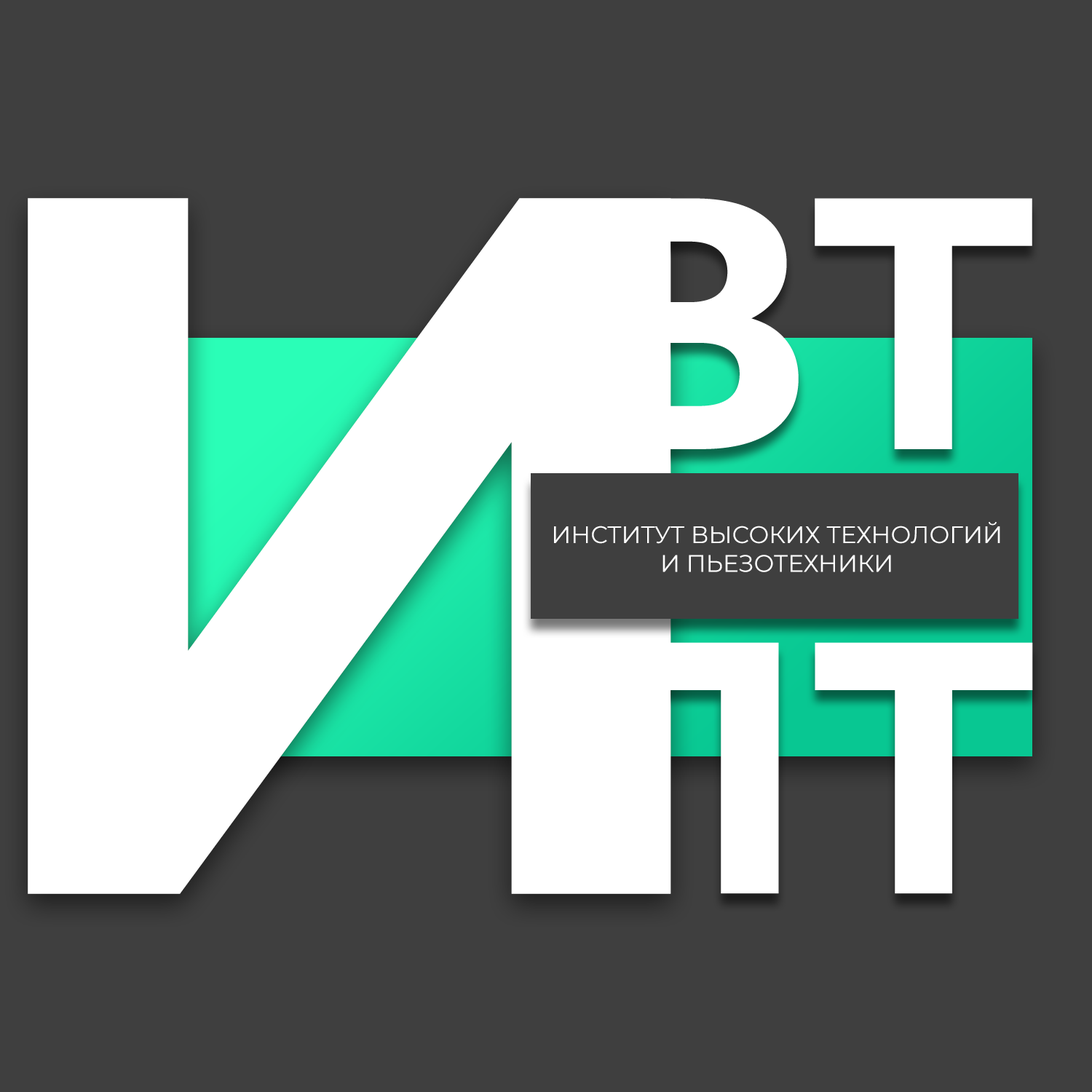
<style>
.page{position:relative;width:1092px;height:1092px;background:#3f3f3f}
.page>*{position:absolute;margin:0}
.t1{font:993.3px "Montserrat-Bold";color:#ffffff;text-transform:uppercase}
.t2{font:23.9px "Montserrat-Regular";color:#ffffff;text-transform:uppercase}
</style>
<div class="page">
<p class="t1" style="left:28px;top:198px;width:643px;height:696px">И</p>
<p class="t2" style="left:554px;top:522px;width:446px;height:50px;text-align:center">Институт Высоких технологий<br>и пьезотехники</p>
</div>
